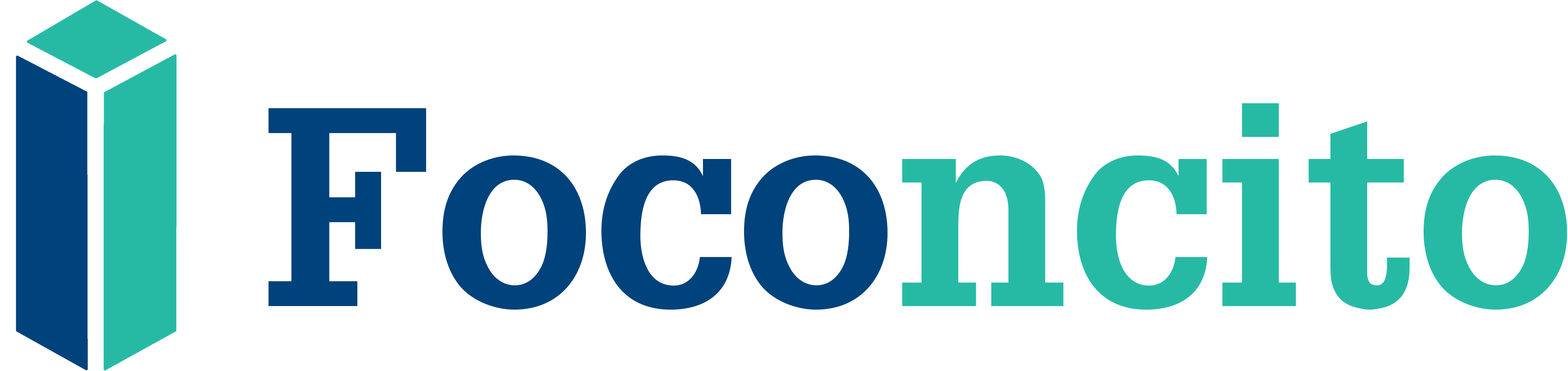
<style>
.page{position:relative;width:1568px;height:371px;background:#ffffff}
.page>*{position:absolute;margin:0}
.t1{font:276px "GlyphaLTStd-Bold";color:#26baa5}
.t2{font:276px "GlyphaLTStd-Bold";color:#00427b}
</style>
<div class="page">
<p class="t1" style="left:268px;top:103px;width:1299px;height:207px"><span class="t2">Foco</span>ncito</p>
</div>
